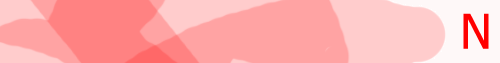
<style>
.page{position:relative;width:500px;height:63px;background:#ffa3a3}
.page>*{position:absolute;margin:0}
.t1{font:48px "Tahoma";color:#ff0000}
</style>
<div class="page">
<p class="t1" style="left:463px;top:13px;width:26px;height:36px">N</p>
</div>
